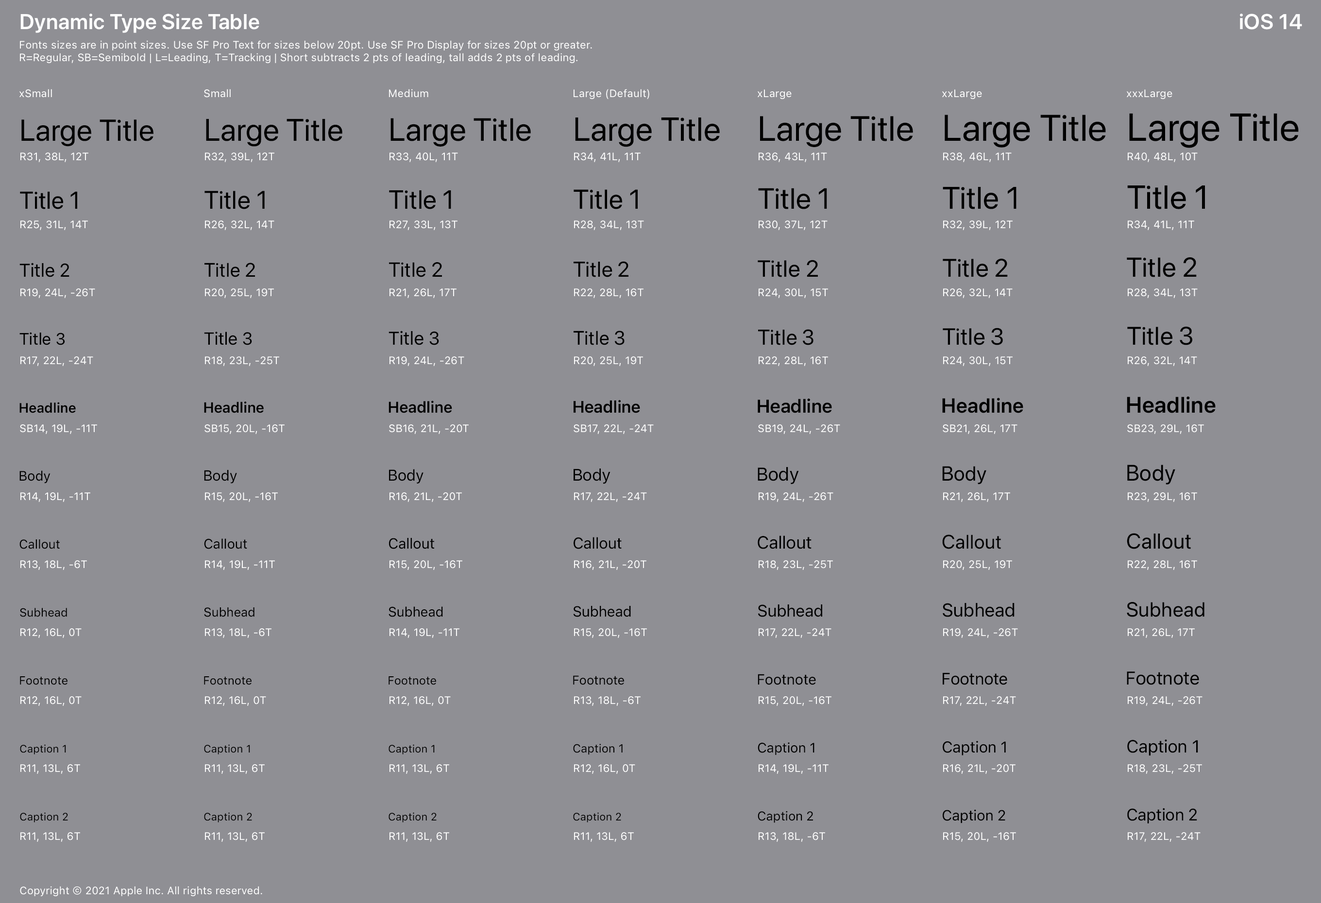
<style>
.page{position:relative;width:1321px;height:903px;background:#8f8f94}
.page>*{position:absolute;margin:0}
.t1{font:21.4px "SFProDisplay-Semibold";letter-spacing:0.016em;color:#ffffff}
.t2{font:10.7px/12.6px "SFProText-Regular";letter-spacing:0.006em;color:#ffffff}
.t3{font:10.7px "SFProText-Regular";letter-spacing:0.013em;color:#ffffff}
.t4{font:38.8px "SFProDisplay-Regular";letter-spacing:0.01em;color:#000000}
.t5{font:30.1px "SFProDisplay-Regular";letter-spacing:0.012em;color:#000000}
.t6{font:31.1px "SFProDisplay-Regular";letter-spacing:0.012em;color:#000000}
.t7{font:32px "SFProDisplay-Regular";letter-spacing:0.011em;color:#000000}
.t8{font:33px "SFProDisplay-Regular";letter-spacing:0.011em;color:#000000}
.t9{font:35px "SFProDisplay-Regular";letter-spacing:0.011em;color:#000000}
.t10{font:36.9px "SFProDisplay-Regular";letter-spacing:0.011em;color:#000000}
.t11{font:10.7px/68px "SFProText-Regular";letter-spacing:0.006em;color:#ffffff}
.t12{font:24.3px "SFProDisplay-Regular";letter-spacing:0.014em;color:#000000}
.t13{font:25.2px "SFProDisplay-Regular";letter-spacing:0.014em;color:#000000}
.t14{font:26.2px "SFProDisplay-Regular";letter-spacing:0.013em;color:#000000}
.t15{font:27.2px "SFProDisplay-Regular";letter-spacing:0.013em;color:#000000}
.t16{font:29.1px "SFProDisplay-Regular";letter-spacing:0.012em;color:#000000}
.t17{font:18.4px "SFProText-Regular";letter-spacing:-0.026em;color:#000000}
.t18{font:19.4px "SFProDisplay-Regular";letter-spacing:0.019em;color:#000000}
.t19{font:20.4px "SFProDisplay-Regular";letter-spacing:0.017em;color:#000000}
.t20{font:21.4px "SFProDisplay-Regular";letter-spacing:0.016em;color:#000000}
.t21{font:23.3px "SFProDisplay-Regular";letter-spacing:0.015em;color:#000000}
.t22{font:16.5px "SFProText-Regular";letter-spacing:-0.024em;color:#000000}
.t23{font:17.5px "SFProText-Regular";letter-spacing:-0.025em;color:#000000}
.t24{font:13.6px "SFProText-Semibold";letter-spacing:-0.011em;color:#000000}
.t25{font:14.6px "SFProText-Semibold";letter-spacing:-0.016em;color:#000000}
.t26{font:15.5px "SFProText-Semibold";letter-spacing:-0.02em;color:#000000}
.t27{font:16.5px "SFProText-Semibold";letter-spacing:-0.024em;color:#000000}
.t28{font:18.4px "SFProText-Semibold";letter-spacing:-0.026em;color:#000000}
.t29{font:20.4px "SFProDisplay-Semibold";letter-spacing:0.017em;color:#000000}
.t30{font:22.3px "SFProDisplay-Semibold";letter-spacing:0.016em;color:#000000}
.t31{font:13.6px "SFProText-Regular";letter-spacing:-0.011em;color:#000000}
.t32{font:14.6px "SFProText-Regular";letter-spacing:-0.016em;color:#000000}
.t33{font:15.5px "SFProText-Regular";letter-spacing:-0.02em;color:#000000}
.t34{font:22.3px "SFProDisplay-Regular";letter-spacing:0.016em;color:#000000}
.t35{font:12.6px "SFProText-Regular";letter-spacing:-0.006em;color:#000000}
.t36{font:11.7px "SFProText-Regular";color:#000000}
.t37{font:10.7px "SFProText-Regular";letter-spacing:0.006em;color:#000000}
.t38{font:10.7px "SFProText-Regular";letter-spacing:0.006em;color:#ffffff}
</style>
<div class="page">
<p class="t1" style="left:20px;top:14px;width:239px;height:19px">Dynamic Type Size Table</p>
<p class="t1" style="left:1239px;top:14px;width:63px;height:16px">iOS 14</p>
<p class="t2" style="left:20px;top:40px;width:572px;height:24px">Fonts sizes are in point sizes. Use SF Pro Text for sizes below 20pt. Use SF Pro Display for sizes 20pt or greater.<br>R=Regular, SB=Semibold | L=Leading, T=Tracking | Short subtracts 2 pts of leading, tall adds 2 pts of leading.</p>
<p class="t3" style="left:19px;top:89px;width:33px;height:9px">xSmall</p>
<p class="t3" style="left:204px;top:89px;width:27px;height:9px">Small</p>
<p class="t3" style="left:389px;top:89px;width:39px;height:9px">Medium</p>
<p class="t3" style="left:573px;top:89px;width:76px;height:10px">Large (Default)</p>
<p class="t3" style="left:757px;top:89px;width:34px;height:10px">xLarge</p>
<p class="t3" style="left:941px;top:89px;width:41px;height:10px">xxLarge</p>
<p class="t3" style="left:1126px;top:89px;width:46px;height:11px">xxxLarge</p>
<p class="t4" style="left:1129px;top:113px;width:169px;height:35px">Large Title</p>
<p class="t5" style="left:21px;top:119px;width:132px;height:28px">Large Title</p>
<p class="t6" style="left:206px;top:119px;width:136px;height:28px">Large Title</p>
<p class="t7" style="left:390px;top:118px;width:141px;height:29px">Large Title</p>
<p class="t8" style="left:575px;top:117px;width:144px;height:30px">Large Title</p>
<p class="t9" style="left:760px;top:116px;width:153px;height:31px">Large Title</p>
<p class="t10" style="left:944px;top:115px;width:161px;height:33px">Large Title</p>
<p class="t11" style="left:20px;top:152px;width:77px;height:690px">R31, 38L, 12T<br>R25, 31L, 14T<br>R19, 24L, -26T<br>R17, 22L, -24T<br>SB14, 19L, -11T<br>R14, 19L, -11T<br>R13, 18L, -6T<br>R12, 16L, 0T<br>R12, 16L, 0T<br>R11, 13L, 6T<br>R11, 13L, 6T</p>
<p class="t11" style="left:204px;top:152px;width:80px;height:690px">R32, 39L, 12T<br>R26, 32L, 14T<br>R20, 25L, 19T<br>R18, 23L, -25T<br>SB15, 20L, -16T<br>R15, 20L, -16T<br>R14, 19L, -11T<br>R13, 18L, -6T<br>R12, 16L, 0T<br>R11, 13L, 6T<br>R11, 13L, 6T</p>
<p class="t11" style="left:389px;top:152px;width:79px;height:690px">R33, 40L, 11T<br>R27, 33L, 13T<br>R21, 26L, 17T<br>R19, 24L, -26T<br>SB16, 21L, -20T<br>R16, 21L, -20T<br>R15, 20L, -16T<br>R14, 19L, -11T<br>R12, 16L, 0T<br>R11, 13L, 6T<br>R11, 13L, 6T</p>
<p class="t11" style="left:573px;top:152px;width:80px;height:690px">R34, 41L, 11T<br>R28, 34L, 13T<br>R22, 28L, 16T<br>R20, 25L, 19T<br>SB17, 22L, -24T<br>R17, 22L, -24T<br>R16, 21L, -20T<br>R15, 20L, -16T<br>R13, 18L, -6T<br>R12, 16L, 0T<br>R11, 13L, 6T</p>
<p class="t11" style="left:758px;top:152px;width:82px;height:690px">R36, 43L, 11T<br>R30, 37L, 12T<br>R24, 30L, 15T<br>R22, 28L, 16T<br>SB19, 24L, -26T<br>R19, 24L, -26T<br>R18, 23L, -25T<br>R17, 22L, -24T<br>R15, 20L, -16T<br>R14, 19L, -11T<br>R13, 18L, -6T</p>
<p class="t11" style="left:942px;top:152px;width:76px;height:690px">R38, 46L, 11T<br>R32, 39L, 12T<br>R26, 32L, 14T<br>R24, 30L, 15T<br>SB21, 26L, 17T<br>R21, 26L, 17T<br>R20, 25L, 19T<br>R19, 24L, -26T<br>R17, 22L, -24T<br>R16, 21L, -20T<br>R15, 20L, -16T</p>
<p class="t11" style="left:1127px;top:152px;width:77px;height:690px">R40, 48L, 10T<br>R34, 41L, 11T<br>R28, 34L, 13T<br>R26, 32L, 14T<br>SB23, 29L, 16T<br>R23, 29L, 16T<br>R22, 28L, 16T<br>R21, 26L, 17T<br>R19, 24L, -26T<br>R18, 23L, -25T<br>R17, 22L, -24T</p>
<p class="t8" style="left:1127px;top:185px;width:77px;height:24px">Title 1</p>
<p class="t12" style="left:20px;top:191px;width:57px;height:18px">Title 1</p>
<p class="t13" style="left:204px;top:191px;width:61px;height:18px">Title 1</p>
<p class="t14" style="left:389px;top:190px;width:62px;height:19px">Title 1</p>
<p class="t15" style="left:573px;top:189px;width:64px;height:20px">Title 1</p>
<p class="t16" style="left:758px;top:188px;width:69px;height:21px">Title 1</p>
<p class="t6" style="left:942px;top:187px;width:74px;height:22px">Title 1</p>
<p class="t15" style="left:1126px;top:257px;width:70px;height:20px">Title 2</p>
<p class="t17" style="left:19px;top:263px;width:50px;height:14px">Title 2</p>
<p class="t18" style="left:204px;top:263px;width:51px;height:14px">Title 2</p>
<p class="t19" style="left:389px;top:262px;width:53px;height:15px">Title 2</p>
<p class="t20" style="left:573px;top:261px;width:55px;height:16px">Title 2</p>
<p class="t21" style="left:757px;top:260px;width:61px;height:17px">Title 2</p>
<p class="t13" style="left:942px;top:258px;width:65px;height:19px">Title 2</p>
<p class="t20" style="left:758px;top:329px;width:55px;height:16px">Title 3</p>
<p class="t21" style="left:942px;top:328px;width:61px;height:17px">Title 3</p>
<p class="t13" style="left:1127px;top:326px;width:65px;height:19px">Title 3</p>
<p class="t22" style="left:19px;top:332px;width:46px;height:13px">Title 3</p>
<p class="t23" style="left:204px;top:332px;width:48px;height:13px">Title 3</p>
<p class="t17" style="left:388px;top:331px;width:51px;height:14px">Title 3</p>
<p class="t18" style="left:573px;top:331px;width:51px;height:14px">Title 3</p>
<p class="t24" style="left:19px;top:402px;width:57px;height:11px">Headline</p>
<p class="t25" style="left:204px;top:401px;width:60px;height:12px">Headline</p>
<p class="t26" style="left:388px;top:401px;width:64px;height:12px">Headline</p>
<p class="t27" style="left:573px;top:400px;width:67px;height:13px">Headline</p>
<p class="t28" style="left:757px;top:398px;width:75px;height:15px">Headline</p>
<p class="t29" style="left:942px;top:398px;width:81px;height:15px">Headline</p>
<p class="t30" style="left:1126px;top:396px;width:89px;height:17px">Headline</p>
<p class="t31" style="left:19px;top:470px;width:31px;height:14px">Body</p>
<p class="t32" style="left:204px;top:470px;width:33px;height:14px">Body</p>
<p class="t33" style="left:389px;top:469px;width:34px;height:15px">Body</p>
<p class="t22" style="left:573px;top:468px;width:37px;height:16px">Body</p>
<p class="t17" style="left:757px;top:467px;width:42px;height:17px">Body</p>
<p class="t19" style="left:942px;top:466px;width:44px;height:19px">Body</p>
<p class="t34" style="left:1127px;top:465px;width:48px;height:20px">Body</p>
<p class="t20" style="left:1126px;top:533px;width:64px;height:16px">Callout</p>
<p class="t35" style="left:19px;top:539px;width:41px;height:10px">Callout</p>
<p class="t31" style="left:204px;top:538px;width:43px;height:11px">Callout</p>
<p class="t32" style="left:389px;top:538px;width:45px;height:11px">Callout</p>
<p class="t33" style="left:573px;top:537px;width:48px;height:12px">Callout</p>
<p class="t23" style="left:757px;top:535px;width:54px;height:14px">Callout</p>
<p class="t18" style="left:942px;top:535px;width:59px;height:14px">Callout</p>
<p class="t32" style="left:573px;top:606px;width:58px;height:11px">Subhead</p>
<p class="t22" style="left:758px;top:604px;width:64px;height:13px">Subhead</p>
<p class="t17" style="left:942px;top:603px;width:72px;height:14px">Subhead</p>
<p class="t19" style="left:1126px;top:602px;width:78px;height:15px">Subhead</p>
<p class="t36" style="left:20px;top:608px;width:47px;height:9px">Subhead</p>
<p class="t35" style="left:204px;top:607px;width:50px;height:10px">Subhead</p>
<p class="t31" style="left:388px;top:606px;width:55px;height:11px">Subhead</p>
<p class="t36" style="left:20px;top:676px;width:47px;height:9px">Footnote</p>
<p class="t36" style="left:204px;top:676px;width:47px;height:9px">Footnote</p>
<p class="t36" style="left:388px;top:676px;width:48px;height:9px">Footnote</p>
<p class="t35" style="left:573px;top:675px;width:51px;height:10px">Footnote</p>
<p class="t32" style="left:757px;top:674px;width:59px;height:11px">Footnote</p>
<p class="t22" style="left:942px;top:673px;width:65px;height:12px">Footnote</p>
<p class="t17" style="left:1126px;top:671px;width:73px;height:14px">Footnote</p>
<p class="t37" style="left:20px;top:744px;width:46px;height:10px">Caption 1</p>
<p class="t37" style="left:204px;top:744px;width:46px;height:10px">Caption 1</p>
<p class="t37" style="left:388px;top:744px;width:47px;height:10px">Caption 1</p>
<p class="t36" style="left:573px;top:744px;width:49px;height:11px">Caption 1</p>
<p class="t31" style="left:757px;top:742px;width:57px;height:13px">Caption 1</p>
<p class="t33" style="left:942px;top:741px;width:63px;height:14px">Caption 1</p>
<p class="t23" style="left:1127px;top:739px;width:71px;height:17px">Caption 1</p>
<p class="t32" style="left:942px;top:809px;width:63px;height:14px">Caption 2</p>
<p class="t22" style="left:1127px;top:808px;width:70px;height:15px">Caption 2</p>
<p class="t37" style="left:20px;top:812px;width:48px;height:10px">Caption 2</p>
<p class="t37" style="left:204px;top:812px;width:48px;height:10px">Caption 2</p>
<p class="t37" style="left:388px;top:812px;width:48px;height:10px">Caption 2</p>
<p class="t37" style="left:573px;top:812px;width:48px;height:10px">Caption 2</p>
<p class="t35" style="left:757px;top:811px;width:56px;height:12px">Caption 2</p>
<p class="t38" style="left:20px;top:886px;width:242px;height:11px">Copyright © 2021 Apple Inc. All rights reserved.</p>
</div>
